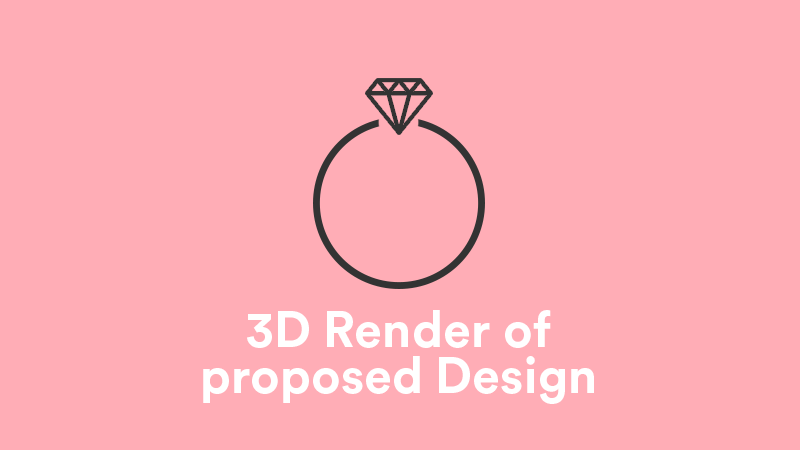
<style>
.page{position:relative;width:800px;height:450px;background:#ffadb6}
.page>*{position:absolute;margin:0}
.t1{font:50.7px/46.7px "CircularStd-Bold";color:#ffffff}
.t2{font:50.7px/46.7px "CircularStd-Bold";color:#ffffff;text-transform:uppercase}
</style>
<div class="page">
<p class="t1" style="left:203px;top:310px;width:391px;height:94px;text-align:center"><span class="t2">3D </span>Render of<br>proposed Design</p>
</div>
